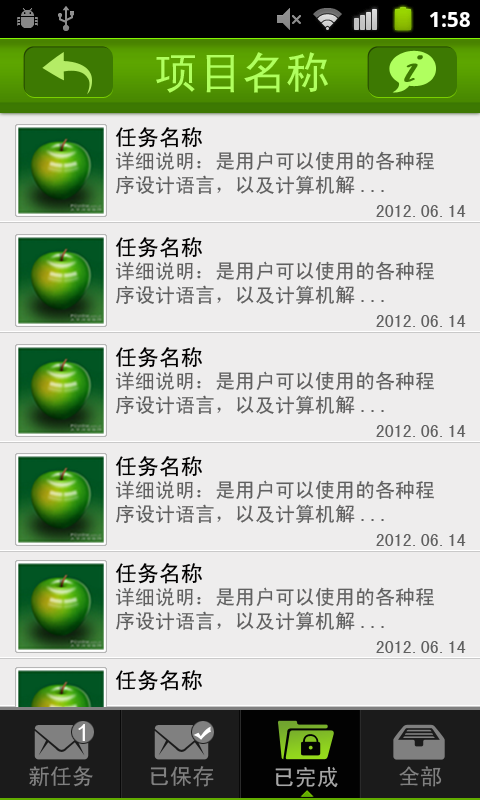
<style>
.page{position:relative;width:480px;height:800px;background:#eeeded}
.page>*{position:absolute;margin:0}
.t1{font:44px "SimHei";color:#b0ff5f}
.t2{font:46.3px "MonotypeCorsiva";color:#3d7902;font-weight:bold}
.t3{font:22px "SimHei";color:#010000}
.t4{font:20px/23.8px "SimHei";color:#606060}
.t5{font:18px "SimHei";color:#606060}
.t6{font:23px "ArialMT";color:#fffefe}
.t7{font:22px "SimHei";color:#808080}
.t8{font:22px "SimHei";color:#a6a6a6}
</style>
<div class="page">
<p class="t1" style="left:156px;top:52px;width:172px;height:41px">项目名称</p>
<p class="t2" style="left:404px;top:55px;width:19px;height:27px;rotate:16deg">i</p>
<p class="t3" style="left:115px;top:127px;width:87px;height:21px">任务名称</p>
<p class="t4" style="left:115px;top:151px;width:319px;height:44px">详细说明：是用户可以使用的各种程<br>序设计语言，以及计算机解...</p>
<p class="t5" style="left:376px;top:205px;width:90px;height:12px">2012.06.14</p>
<p class="t3" style="left:115px;top:237px;width:87px;height:21px">任务名称</p>
<p class="t4" style="left:115px;top:261px;width:319px;height:44px">详细说明：是用户可以使用的各种程<br>序设计语言，以及计算机解...</p>
<p class="t5" style="left:376px;top:315px;width:90px;height:12px">2012.06.14</p>
<p class="t3" style="left:115px;top:347px;width:87px;height:21px">任务名称</p>
<p class="t4" style="left:115px;top:371px;width:319px;height:44px">详细说明：是用户可以使用的各种程<br>序设计语言，以及计算机解...</p>
<p class="t5" style="left:376px;top:425px;width:90px;height:12px">2012.06.14</p>
<p class="t3" style="left:115px;top:456px;width:87px;height:21px">任务名称</p>
<p class="t4" style="left:115px;top:480px;width:319px;height:44px">详细说明：是用户可以使用的各种程<br>序设计语言，以及计算机解...</p>
<p class="t5" style="left:376px;top:534px;width:90px;height:12px">2012.06.14</p>
<p class="t3" style="left:115px;top:563px;width:87px;height:21px">任务名称</p>
<p class="t4" style="left:115px;top:587px;width:319px;height:44px">详细说明：是用户可以使用的各种程<br>序设计语言，以及计算机解...</p>
<p class="t5" style="left:376px;top:641px;width:90px;height:12px">2012.06.14</p>
<p class="t3" style="left:115px;top:670px;width:87px;height:21px">任务名称</p>
<p class="t6" style="left:78px;top:724px;width:7px;height:17px">1</p>
<p class="t7" style="left:29px;top:766px;width:64px;height:21px">新任务</p>
<p class="t7" style="left:150px;top:766px;width:64px;height:21px">已保存</p>
<p class="t8" style="left:275px;top:766px;width:63px;height:22px">已完成</p>
<p class="t7" style="left:399px;top:766px;width:43px;height:21px">全部</p>
</div>
